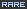
<style>
.page{position:relative;width:27px;height:9px;background:#333333}
.page>*{position:absolute;margin:0}
.t1{font:8px "5x5-Pixel";color:#b1d7fc}
</style>
<div class="page">
<p class="t1" style="left:2px;top:2px;width:23px;height:5px">rare</p>
</div>
